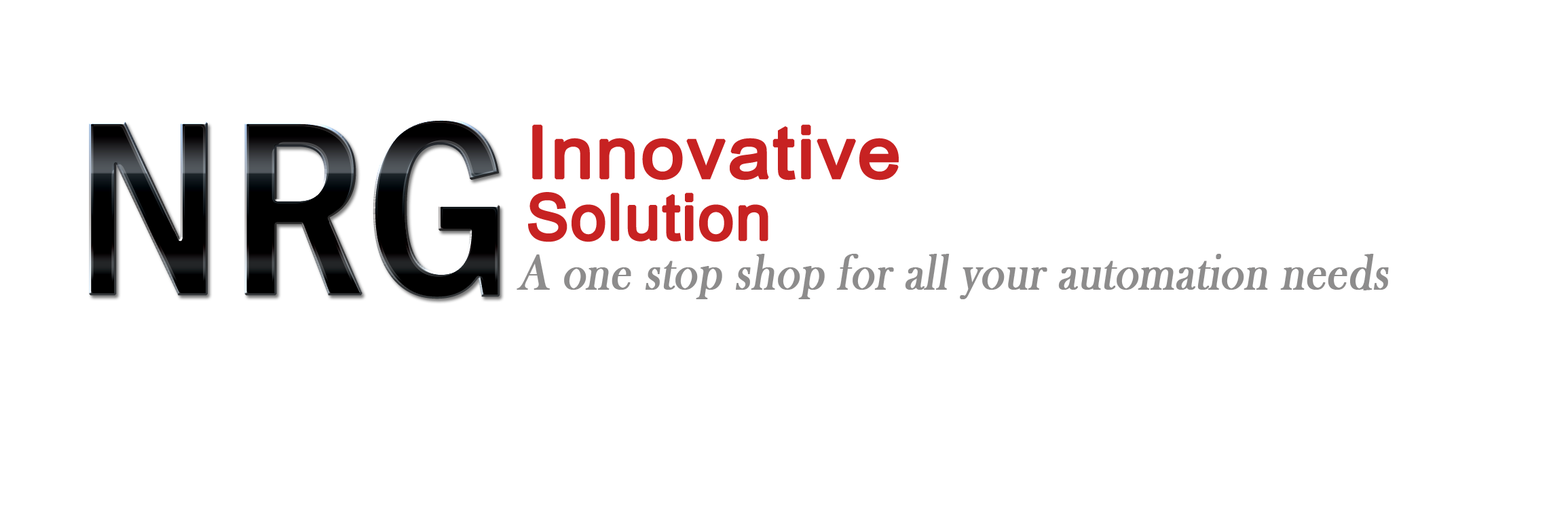
<style>
.page{position:relative;width:1568px;height:515px;background:#ffffff}
.page>*{position:absolute;margin:0}
.t1{font:255.9px "FranklinGothic-MediumCond";font-weight:bold}
.t2{font:101.1px "Utsaah";color:#c72222;font-weight:bold;scale:1.05 1}
.t3{font:88.5px "Utsaah";color:#c72222;font-weight:bold}
.t4{font:51.5px "BaskOldFace";color:#8d8c8c;font-weight:bold;font-style:italic;scale:0.86 1}
</style>
<div class="page">
<p class="t1" style="left:89px;top:118px;width:411px;height:181px">NRG</p>
<p class="t2" style="left:532px;top:124px;width:367px;height:57px">Innovative</p>
<p class="t3" style="left:528px;top:192px;width:240px;height:50px">Solution</p>
<p class="t4" style="left:517px;top:254px;width:872px;height:45px">A one stop shop for all your automation needs</p>
</div>
